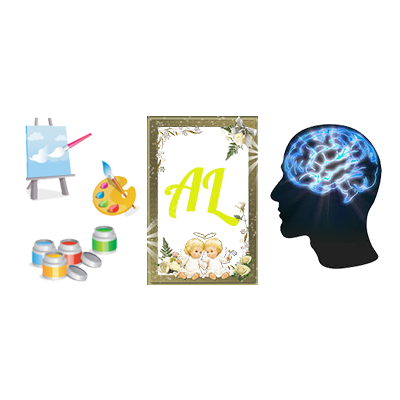
<style>
.page{position:relative;width:400px;height:400px;background:#ffffff}
.page>*{position:absolute;margin:0}
.t1{font:58.7px "Lobster1.4";color:#e0ed12}
</style>
<div class="page">
<p class="t1" style="left:164px;top:167px;width:77px;height:60px">AL</p>
</div>
